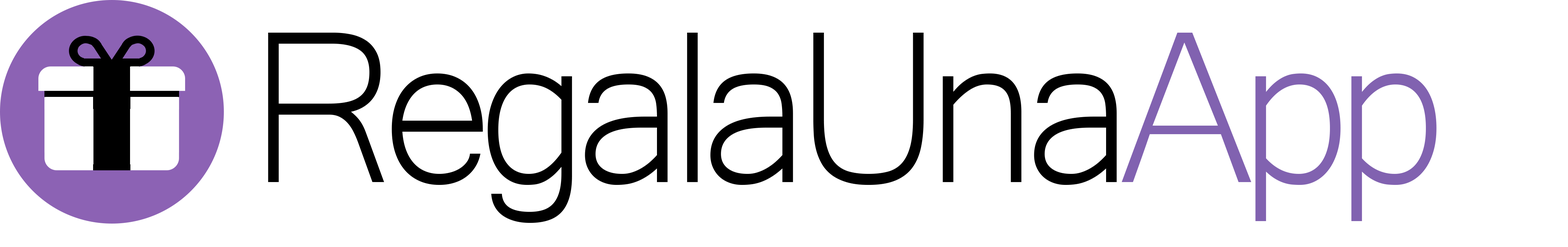
<style>
.page{position:relative;width:1568px;height:247px;background:#ffffff}
.page>*{position:absolute;margin:0}
.t1{font:279.6px "Microsoft-Yi-Baiti";letter-spacing:-0.06em;color:#000000;scale:0.97 1}
.t2{font:279.6px "Microsoft-Yi-Baiti";letter-spacing:-0.06em;color:#8162b0;scale:0.97 1}
</style>
<div class="page">
<p class="t1" style="left:268px;top:33px;width:1169px;height:190px">RegalaUna<span class="t2">App</span></p>
</div>
